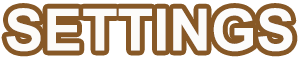
<style>
.page{position:relative;width:300px;height:60px;background:#875826}
.page>*{position:absolute;margin:0}
.t1{font:58px "Arial-BoldMT";color:#ffffff}
</style>
<div class="page">
<p class="t1" style="left:6px;top:8px;width:287px;height:44px">SETTINGS</p>
</div>
